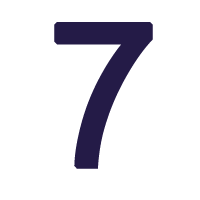
<style>
.page{position:relative;width:200px;height:200px;background:#ffffff}
.page>*{position:absolute;margin:0}
.t1{font:200px "ArialMT";color:#241b47;font-weight:bold}
</style>
<div class="page">
<p class="t1" style="left:54px;top:22px;width:99px;height:147px">7</p>
</div>
